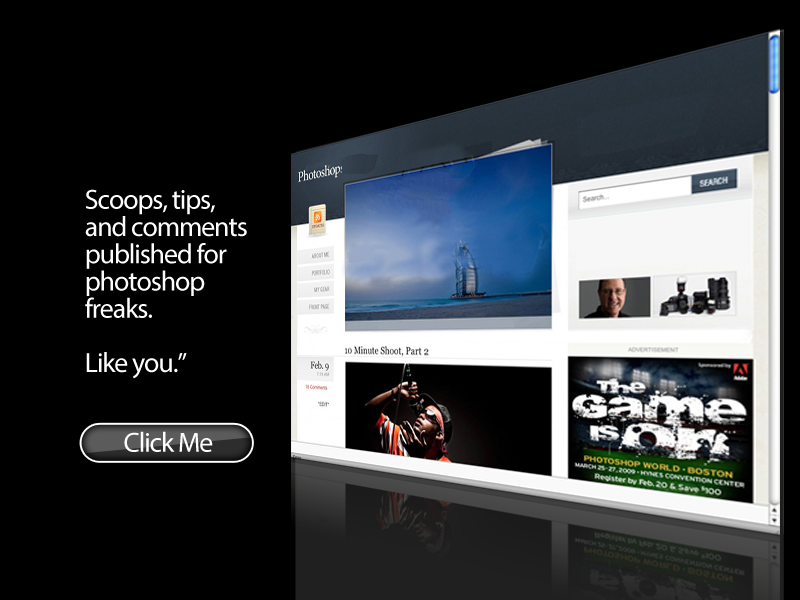
<style>
.page{position:relative;width:800px;height:600px;background:#000000}
.page>*{position:absolute;margin:0}
.t1{font:28px/27.2px "MyriadPro-Regular";letter-spacing:-0.04em;color:#fefefe}
.t2{font:28px "MyriadPro-Regular";letter-spacing:-0.04em;color:#fefefe}
</style>
<div class="page">
<p class="t1" style="left:85px;top:189px;width:162px;height:190px">Scoops, tips, and comments published for photoshop freaks. <br><br>Like you.”</p>
<p class="t2" style="left:124px;top:431px;width:89px;height:21px">Click Me</p>
</div>
